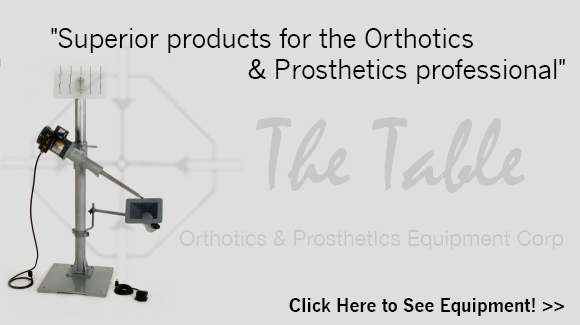
<style>
.page{position:relative;width:580px;height:325px;background:#dededf}
.page>*{position:absolute;margin:0}
.t1{font:26px "NewsGothicMT";letter-spacing:-0.02em;color:#000000}
.t2{font:18px "NewsGothicMT-Bold";letter-spacing:-0.02em;color:#000000}
</style>
<div class="page">
<p class="t1" style="left:51px;top:28px;width:514px;height:56px;text-align:center">"Superior products for the Orthotics <br>                                     &amp; Prosthetics professional"</p>
<p class="t2" style="left:289px;top:298px;width:276px;height:18px">Click Here to See Equipment! &gt;&gt;</p>
</div>
